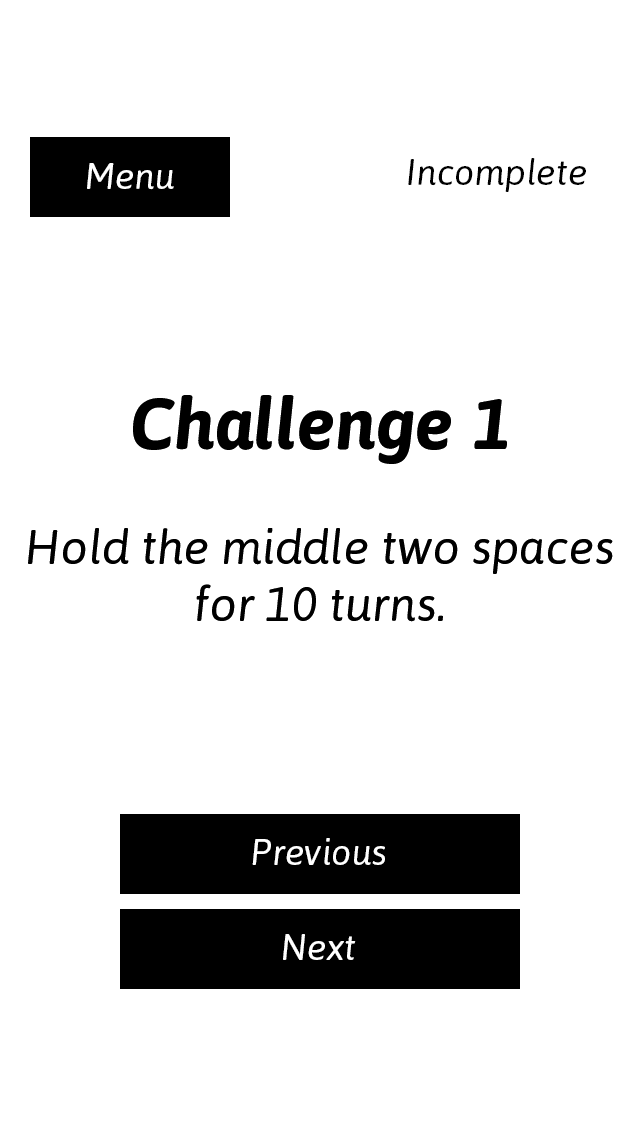
<style>
.page{position:relative;width:640px;height:1136px;background:#ffffff}
.page>*{position:absolute;margin:0}
.t1{font:36px "Asap-Italic";color:#000000}
.t2{font:48px "Asap-Italic";color:#000000}
.t3{font:72px "Asap-BoldItalic";color:#000000}
.t4{font:36px "Asap-Italic";color:#ffffff}
</style>
<div class="page">
<p class="t1" style="left:408px;top:158px;width:178px;height:34px">Incomplete</p>
<p class="t2" style="left:28px;top:395px;width:585px;height:227px;text-align:center"><span class="t3">Challenge 1<br></span><br>Hold the middle two spaces for 10 turns.</p>
<p class="t2" style="left:28px;top:395px;width:585px;height:227px;text-align:center"><span class="t3">Challenge 1<br></span><br>Hold the middle two spaces for 10 turns.</p>
<p class="t4" style="left:252px;top:838px;width:133px;height:27px">Previous</p>
<p class="t4" style="left:283px;top:934px;width:73px;height:26px">Next</p>
</div>
